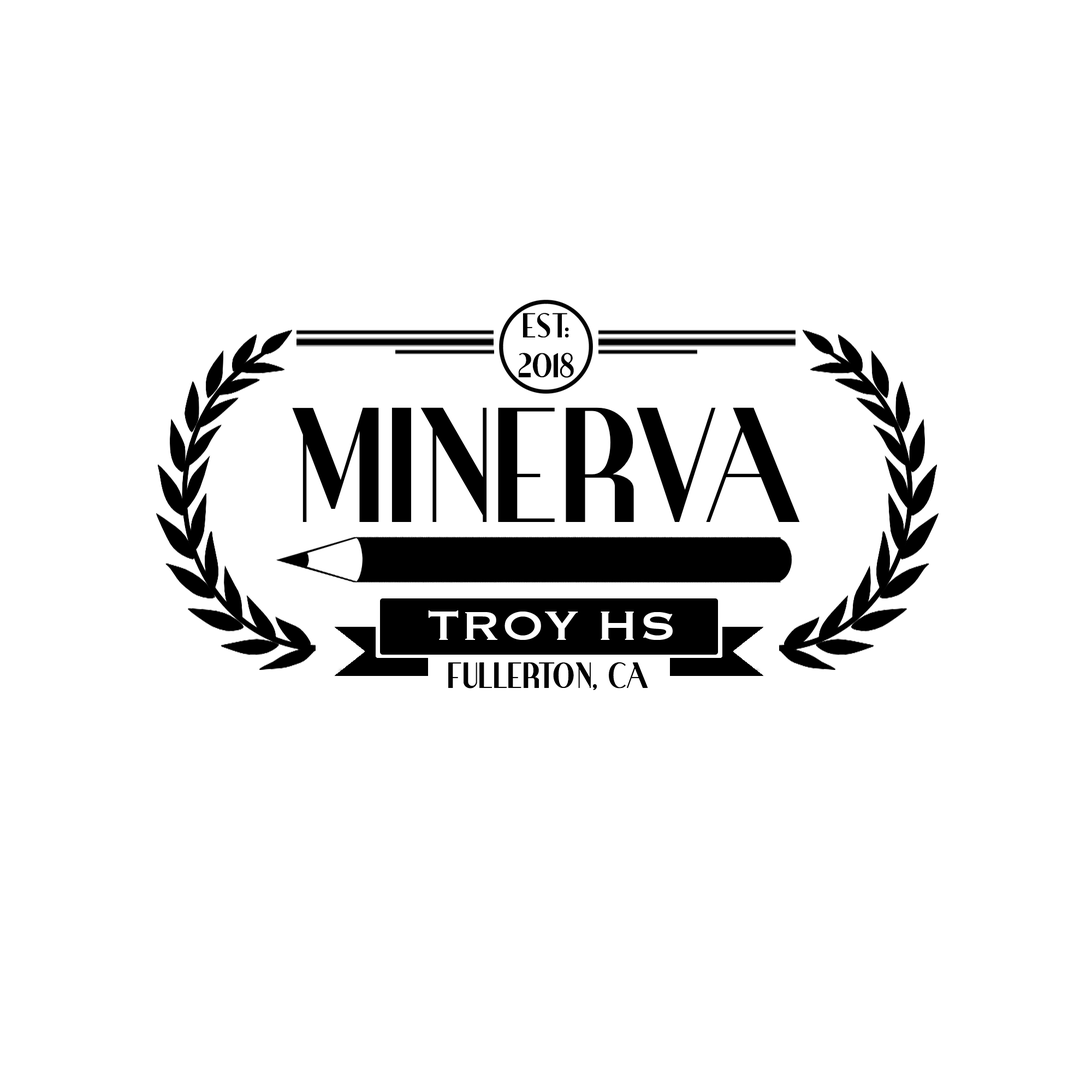
<style>
.page{position:relative;width:1092px;height:1092px;background:#ffffff}
.page>*{position:absolute;margin:0}
.t1{font:33.2px "IronickNF";color:#000000}
.t2{font:158.4px "IronickNF";color:#000000}
.t3{font:34.9px "IronickNF";color:#000000}
</style>
<div class="page">
<p class="t1" style="left:518px;top:313px;width:56px;height:65px;text-align:center">EST.<br>2018</p>
<p class="t2" style="left:292px;top:407px;width:508px;height:115px">MINERVA</p>
<p class="t3" style="left:448px;top:662px;width:200px;height:28px">FULLERTON, CA</p>
</div>
